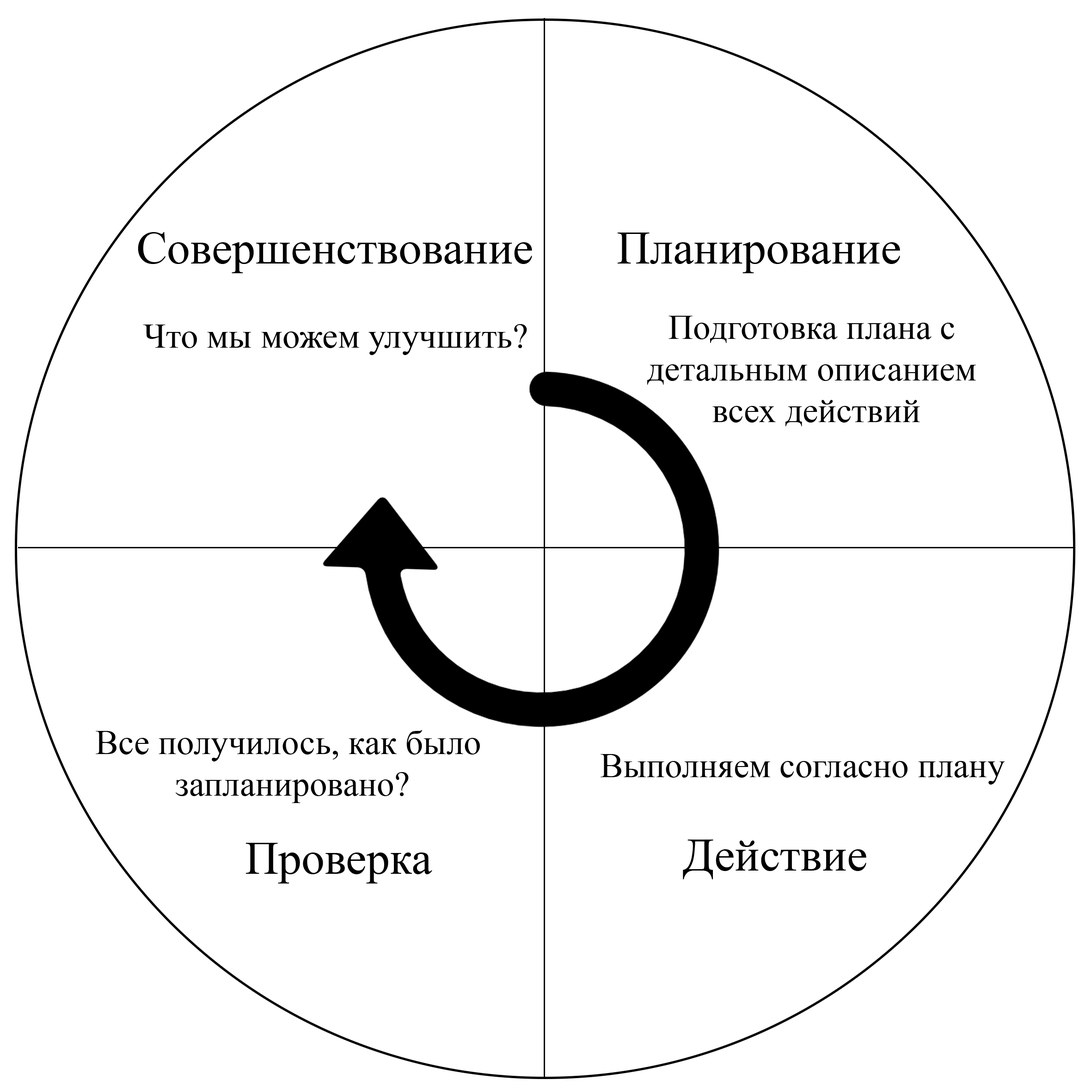
<style>
.page{position:relative;width:1092px;height:1092px;background:#ffffff}
.page>*{position:absolute;margin:0}
.t1{font:46.2px "TimesNewRomanPSMT";color:#000000}
.t2{font:34.7px "TimesNewRomanPSMT";color:#000000}
</style>
<div class="page">
<p class="t1" style="left:138px;top:232px;width:394px;height:41px">Совершенствование</p>
<p class="t1" style="left:617px;top:233px;width:283px;height:40px">Планирование</p>
<p class="t2" style="left:647px;top:316px;width:329px;height:110px;text-align:center">Подготовка плана с <br>детальным описанием <br>всех действий</p>
<p class="t2" style="left:143px;top:324px;width:384px;height:31px">Что мы можем улучшить?</p>
<p class="t2" style="left:96px;top:730px;width:384px;height:73px;text-align:center">Все получилось, как было <br>запланировано?</p>
<p class="t2" style="left:601px;top:754px;width:404px;height:31px">Выполняем согласно плану</p>
<p class="t1" style="left:245px;top:843px;width:187px;height:40px">Проверка</p>
<p class="t1" style="left:683px;top:840px;width:183px;height:39px">Действие</p>
</div>
